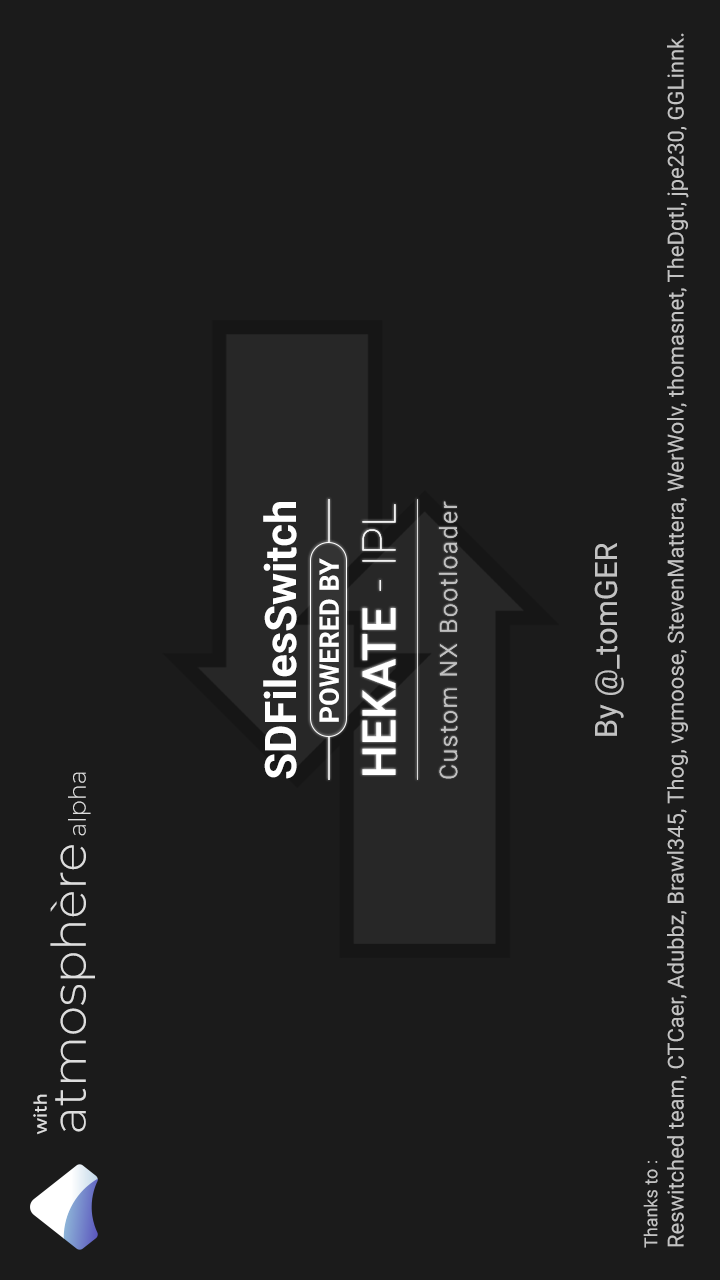
<style>
.page{position:relative;width:720px;height:1280px;background:#1b1b1b}
.page>*{position:absolute;margin:0}
.t1{font:22px "Roboto-Regular";color:#c3c3c3}
.t2{font:18px "Roboto-Regular";color:#c3c3c3}
.t3{font:43.4px "Roboto-Bold";color:#ffffff}
.t4{font:46.4px "Roboto-Thin";color:#f5f5f5}
.t5{font:24px "Roboto-Light";letter-spacing:0.08em;color:#c1c1c1}
.t6{font:31px "Roboto-Regular";color:#c2c2c2}
.t7{font:26.9px "Roboto-Bold";color:#ffffff}
.t8{font:46.4px "Roboto-Medium";color:#ffffff}
.t9{font:48px/39px "Montserrat-Light";color:#dddddd}
.t10{font:18px/39px "Montserrat-Regular";color:#dddddd}
.t11{font:24px/39px "Montserrat-Light";color:#dddddd}
</style>
<div class="page">
<p class="t1" style="left:643px;top:33px;width:46px;height:1215px;rotate:-90deg"><span class="t2">Thanks to :<br></span>Reswitched team, CTCaer, Adubbz, Brawl345, Thog, vgmoose, StevenMattera, WerWolv, thomasnet, TheDgtl, jpe230, GGLinnk.</p>
<p class="t3" style="left:263px;top:502px;width:34px;height:277px;rotate:-90deg">SDFilesSwitch</p>
<p class="t4" style="left:362px;top:504px;width:34px;height:87px;rotate:-90deg">- IPL</p>
<p class="t4" style="left:362px;top:504px;width:34px;height:87px;rotate:-90deg">- IPL</p>
<p class="t5" style="left:439px;top:501px;width:19px;height:278px;rotate:-90deg">Custom NX Bootloader</p>
<p class="t5" style="left:439px;top:501px;width:19px;height:278px;rotate:-90deg;opacity:0.95">Custom NX Bootloader</p>
<p class="t6" style="left:594px;top:543px;width:30px;height:193px;rotate:-90deg">By @_tomGER</p>
<p class="t7" style="left:319px;top:558px;width:20px;height:164px;rotate:-90deg">POWERED BY</p>
<p class="t8" style="left:362px;top:608px;width:34px;height:167px;rotate:-90deg">HEKATE</p>
<p class="t9" style="left:33px;top:772px;width:62px;height:363px;rotate:-90deg"><span class="t10">with<br></span>atmosphère<span class="t11"> alpha</span></p>
</div>
